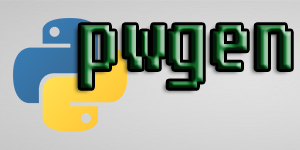
<style>
.page{position:relative;width:300px;height:150px}
.page>*{position:absolute;margin:0}
.t1{font:80px "Fixedsys";letter-spacing:-0.02em;scale:0.91 1}
</style>
<div class="page">
<p class="t1" style="left:80px;top:25px;width:211px;height:63px">pwgen</p>
</div>
